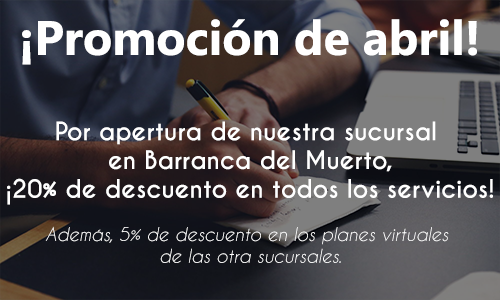
<style>
.page{position:relative;width:500px;height:300px}
.page>*{position:absolute;margin:0}
.t1{font:48px "Ebrima-Bold";color:#ffffff}
.t2{font:24px "CaviarDreams-Bold";color:#ffffff}
.t3{font:18px "CaviarDreams-Italic";color:#ffffff}
</style>
<div class="page">
<p class="t1" style="left:22px;top:19px;width:455px;height:46px">¡Promoción de abril!</p>
<p class="t2" style="left:7px;top:121px;width:486px;height:142px;text-align:center">Por apertura de nuestra sucursal <br>en Barranca del Muerto,<br>¡20% de descuento en todos los servicios!<br><br><span class="t3">Además, 5% de descuento en los planes virtuales <br>de las otra sucursales.</span></p>
</div>
